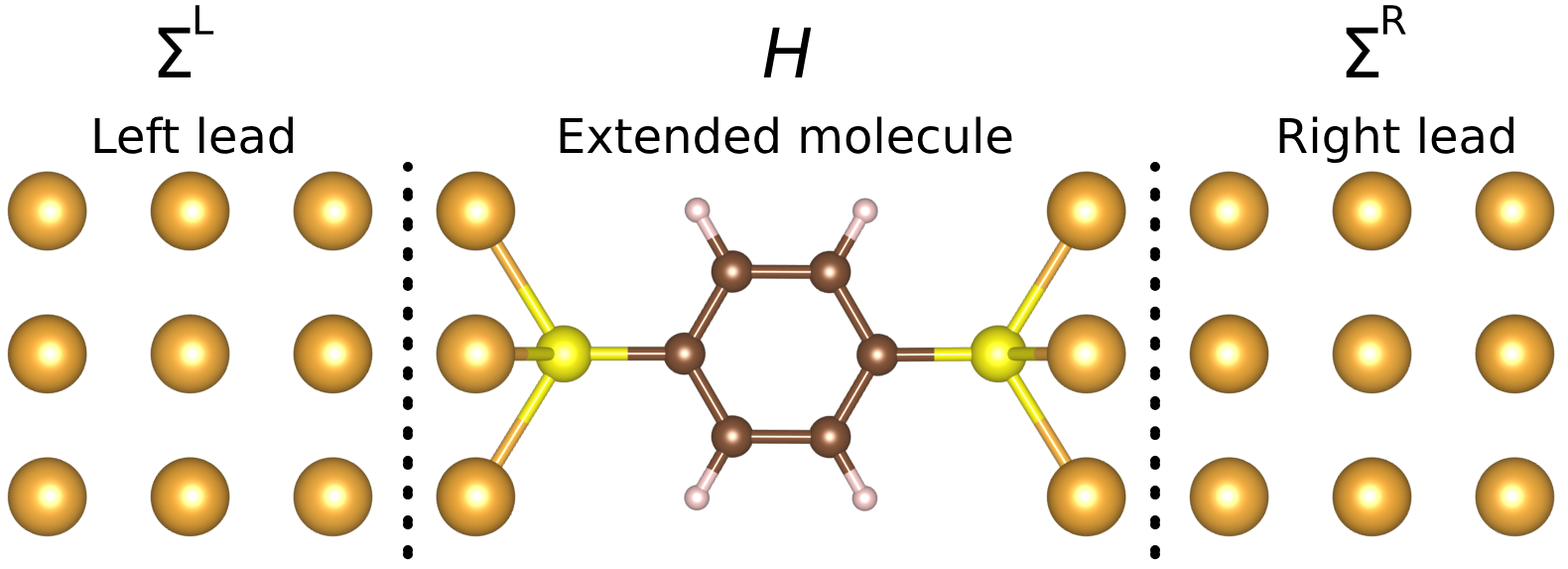
<style>
.page{position:relative;width:1568px;height:569px;background:#ffffff}
.page>*{position:absolute;margin:0}
.t1{font:68.5px "DejaVuSans";color:#000000}
.t2{font:68.5px "DejaVuSans";color:#000000;font-style:italic}
.t3{font:47.6px "DejaVuSans";color:#000000}
</style>
<div class="page">
<p class="t1" style="left:195px;top:5px;width:19px;height:30px">L</p>
<p class="t1" style="left:1382px;top:5px;width:24px;height:30px">R</p>
<p class="t1" style="left:158px;top:27px;width:34px;height:50px">Σ</p>
<p class="t2" style="left:763px;top:27px;width:49px;height:50px"><span class="t1"> </span>H</p>
<p class="t1" style="left:1346px;top:27px;width:33px;height:50px">Σ</p>
<p class="t3" style="left:94px;top:116px;width:199px;height:38px">Left lead</p>
<p class="t3" style="left:560px;top:116px;width:452px;height:38px">Extended molecule</p>
<p class="t3" style="left:1279px;top:116px;width:235px;height:47px">Right lead</p>
</div>
